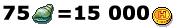
<style>
.page{position:relative;width:177px;height:28px;background:#ffffff}
.page>*{position:absolute;margin:0}
.t1{font:19px "Verdana-Bold";color:#000000;font-weight:bold}
</style>
<div class="page">
<p class="t1" style="left:3px;top:5px;width:26px;height:15px">75</p>
<p class="t1" style="left:75px;top:5px;width:74px;height:15px">15 000</p>
</div>
